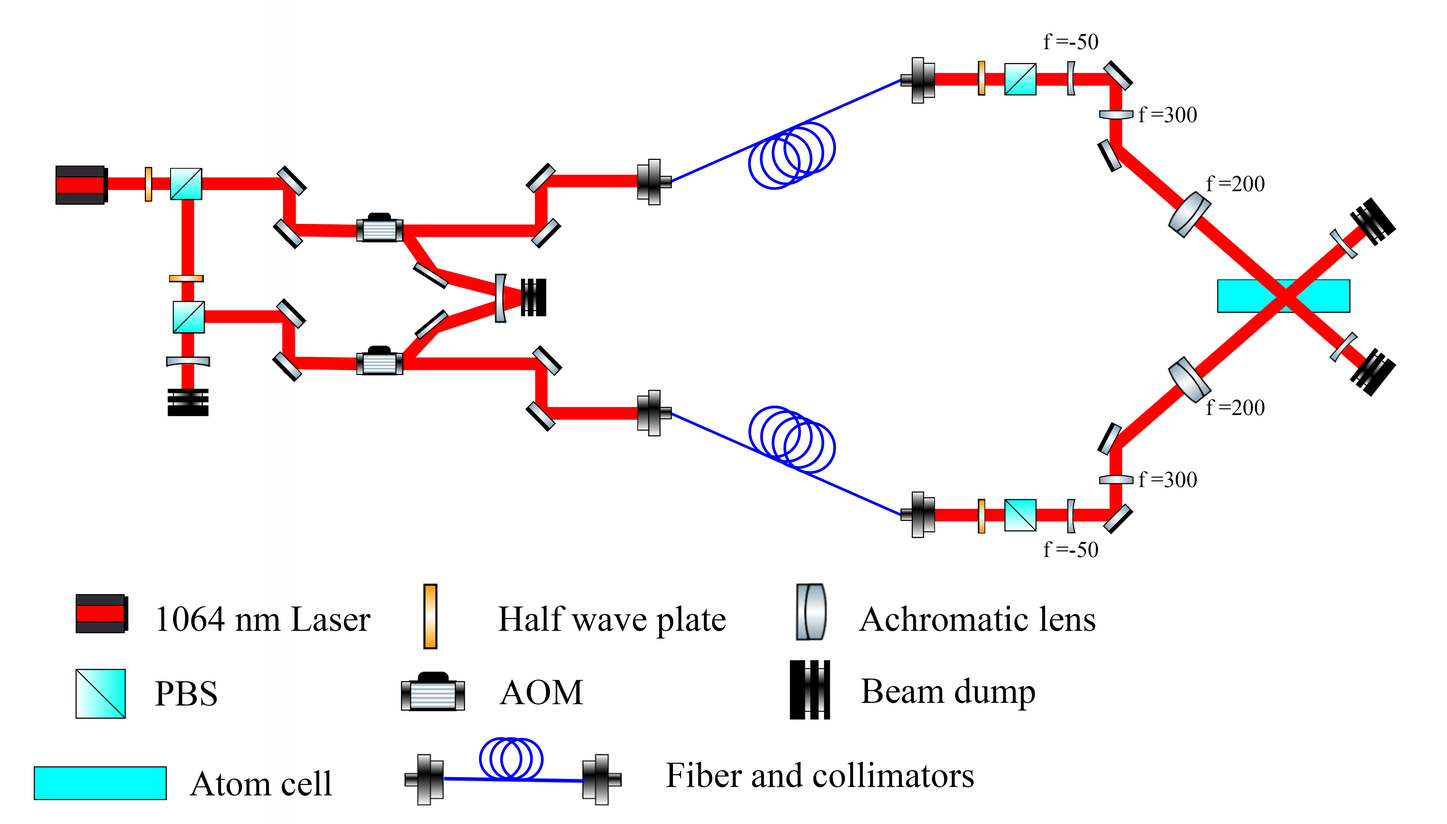
<style>
.page{position:relative;width:1447px;height:824px;background:#ffffff}
.page>*{position:absolute;margin:0}
.t1{font:22.4px "TimesNewRomanPSMT";color:#000000}
.t2{font:35.9px "TimesNewRomanPSMT";color:#000000}
</style>
<div class="page">
<p class="t1" style="left:1043px;top:33px;width:55px;height:16px">f =-50</p>
<p class="t1" style="left:1138px;top:106px;width:59px;height:17px">f =300</p>
<p class="t1" style="left:1206px;top:175px;width:58px;height:17px">f =200</p>
<p class="t1" style="left:1206px;top:399px;width:58px;height:17px">f =200</p>
<p class="t1" style="left:1138px;top:471px;width:59px;height:17px">f =300</p>
<p class="t1" style="left:1043px;top:541px;width:55px;height:17px">f =-50</p>
<p class="t2" style="left:498px;top:606px;width:228px;height:33px">Half wave plate</p>
<p class="t2" style="left:858px;top:606px;width:237px;height:25px">Achromatic lens</p>
<p class="t2" style="left:158px;top:606px;width:213px;height:25px">1064 nm Laser</p>
<p class="t2" style="left:861px;top:678px;width:174px;height:33px">Beam dump</p>
<p class="t2" style="left:155px;top:681px;width:62px;height:25px">PBS</p>
<p class="t2" style="left:499px;top:680px;width:84px;height:25px">AOM</p>
<p class="t2" style="left:189px;top:770px;width:143px;height:26px">Atom cell</p>
<p class="t2" style="left:666px;top:762px;width:307px;height:26px">Fiber and collimators</p>
</div>
